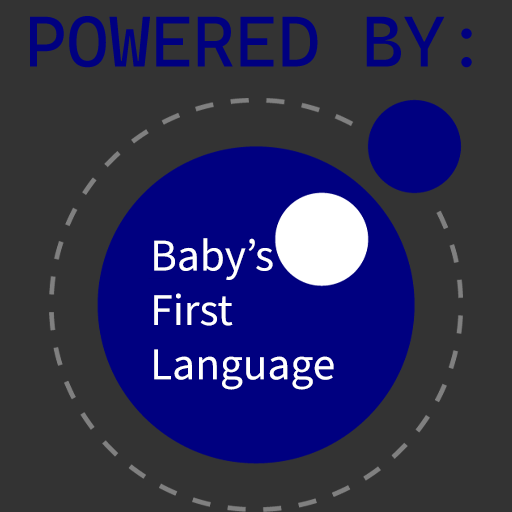
<style>
.page{position:relative;width:512px;height:512px;background:#333333}
.page>*{position:absolute;margin:0}
.t1{font:71.9px "CascadiaMono-Regular";color:#000080}
.t2{font:45.4px "SourceSansRoman-Regular";color:#ffffff}
</style>
<div class="page">
<p class="t1" style="left:30px;top:16px;width:442px;height:52px">POWERED BY:</p>
<p class="t2" style="left:154px;top:238px;width:180px;height:152px">Baby’s<br>First <br>Language</p>
</div>
